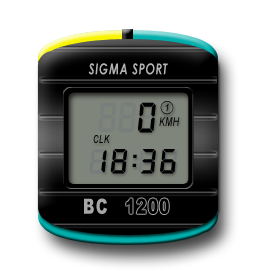
<style>
.page{position:relative;width:256px;height:274px;background:#ffffff}
.page>*{position:absolute;margin:0}
.t1{font:15px "CenturyGothic-BoldItalic";letter-spacing:0.07em;color:#b3b3b3;scale:0.73 1}
.t2{font:40px "LiquidCrystal";letter-spacing:0.07em;color:#000000;scale:0.9 1}
.t3{font:12px "Arial-ItalicMT";letter-spacing:0.07em;color:#000000;scale:0.7 1}
.t4{font:11px "Arial-ItalicMT";letter-spacing:0.07em;color:#000000;scale:0.7 1}
.t5{font:33px "LiquidCrystal";letter-spacing:0.07em;color:#000000}
.t6{font:20.9px "Arial-Black";letter-spacing:0.07em;color:#a6a6a6;scale:0.73 1}
.t7{font:20.9px "Arial-Black";letter-spacing:0.07em;color:#000000;scale:0.73 1}
</style>
<div class="page">
<p class="t1" style="left:88px;top:63px;width:80px;height:12px">SIGMA SPORT</p>
<p class="t2" style="left:138px;top:102px;width:18px;height:31px">0</p>
<p class="t3" style="left:159px;top:117px;width:21px;height:9px">KMH</p>
<p class="t4" style="left:93px;top:135px;width:17px;height:8px">CLK</p>
<p class="t5" style="left:101px;top:149px;width:36px;height:25px">18:</p>
<p class="t5" style="left:141px;top:149px;width:35px;height:25px">36</p>
<p class="t6" style="left:84px;top:198px;width:23px;height:16px">BC</p>
<p class="t7" style="left:126px;top:198px;width:43px;height:16px">1200</p>
</div>
